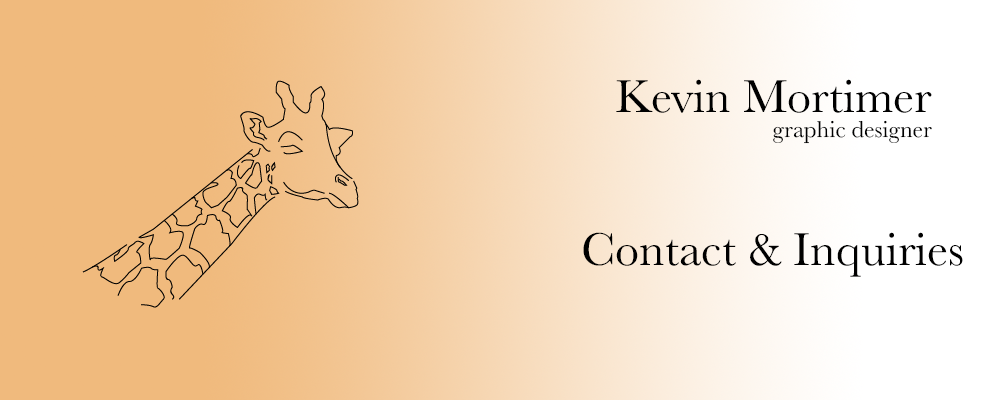
<style>
.page{position:relative;width:1000px;height:400px}
.page>*{position:absolute;margin:0}
.t1{font:48px "Baskerville";color:#000000}
.t2{font:24px "Baskerville";color:#000000}
</style>
<div class="page">
<p class="t1" style="left:616px;top:79px;width:316px;height:34px">Kevin Mortimer</p>
<p class="t2" style="left:773px;top:120px;width:159px;height:24px">graphic designer</p>
<p class="t1" style="left:583px;top:232px;width:380px;height:45px">Contact &amp; Inquiries</p>
</div>
